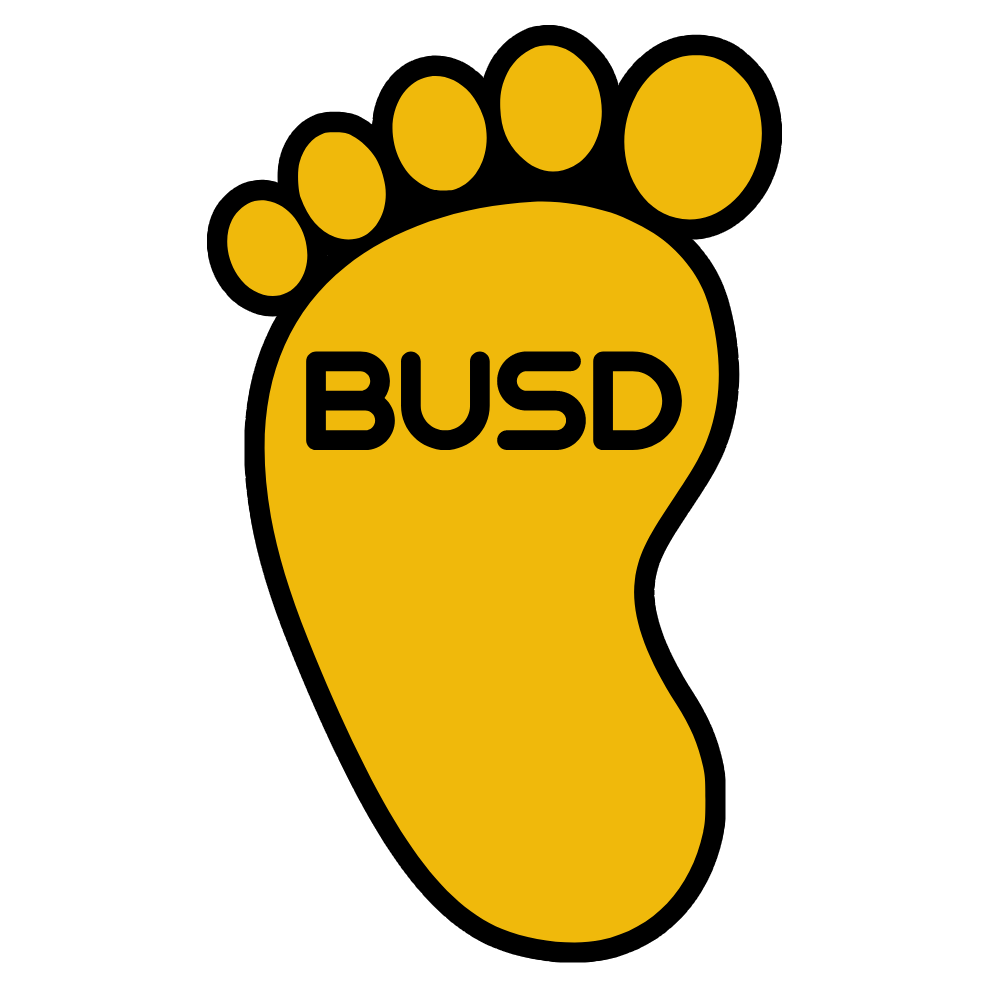
<style>
.page{position:relative;width:987px;height:987px;background:#ffffff}
.page>*{position:absolute;margin:0}
.t1{font:154px "GeometrySoftPro-BoldN";color:#000000}
</style>
<div class="page">
<p class="t1" style="left:306px;top:351px;width:376px;height:99px">BUSD</p>
</div>
